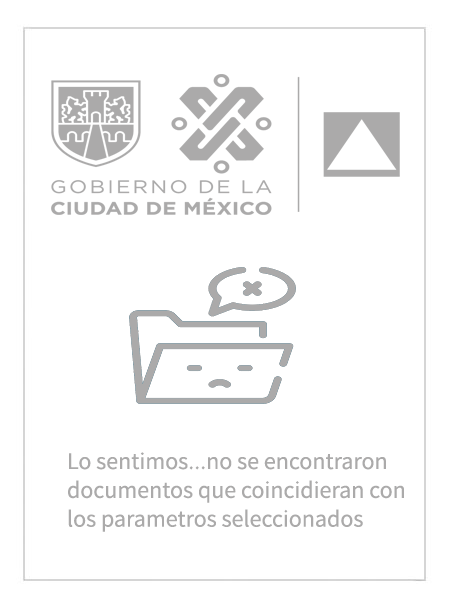
<style>
.page{position:relative;width:450px;height:600px;background:#ffffff}
.page>*{position:absolute;margin:0}
.t1{font:24px "SourceSansPro-Regular";color:#abaaaa}
</style>
<div class="page">
<p class="t1" style="left:68px;top:452px;width:336px;height:80px">Lo sentimos...no se encontraron <br>documentos que coincidieran con<br>los parametros seleccionados</p>
</div>
